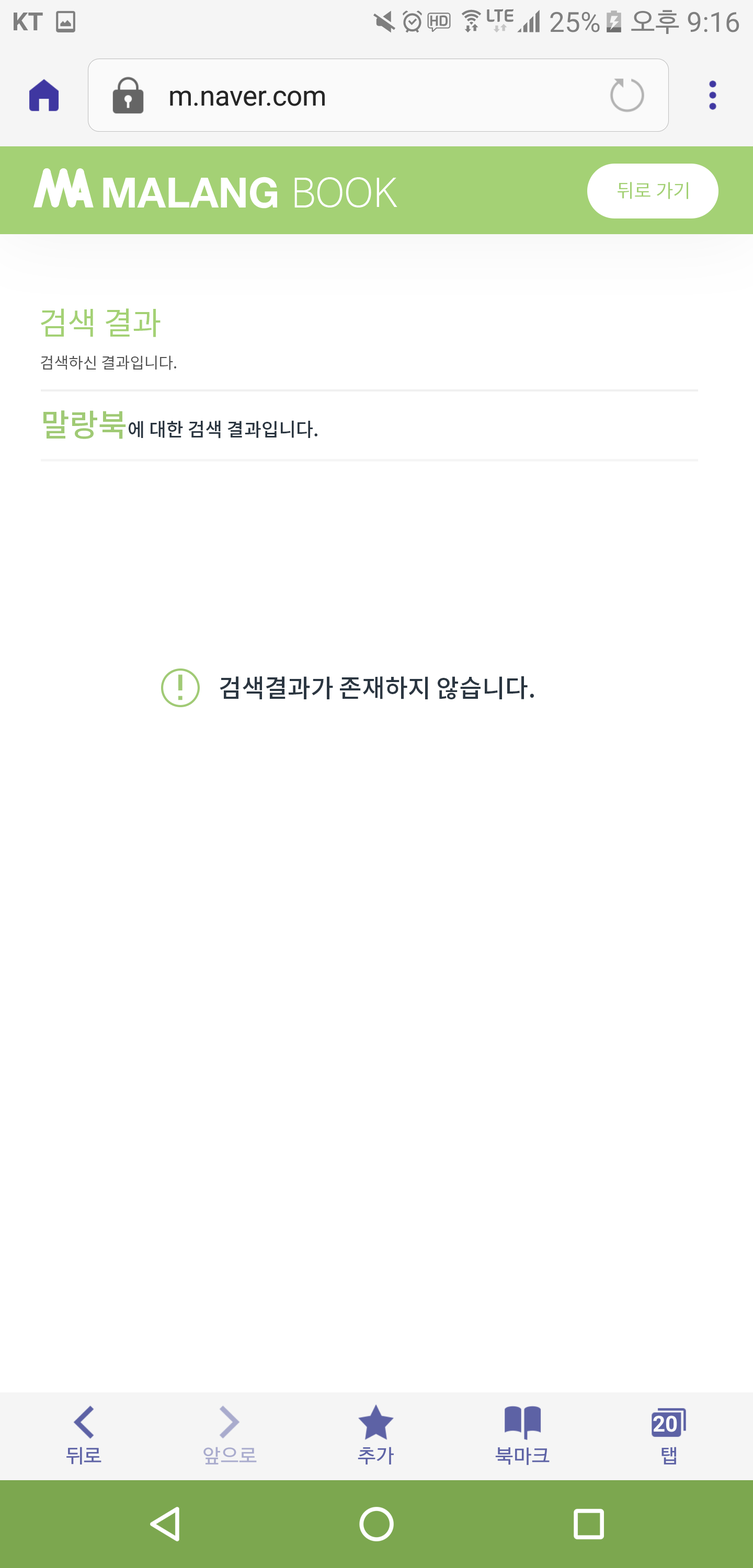
<style>
.page{position:relative;width:753px;height:1568px;background:#ffffff}
.page>*{position:absolute;margin:0}
.t1{font:18.8px "NotoSansCJKkr-Regular";color:#a4d175}
.t2{font:31.4px "NotoSansCJKkr-Regular";color:#a4d175}
.t3{font:15.7px "NotoSansCJKkr-Regular";color:#535353}
.t4{font:18.8px "NotoSansCJKkr-Medium";color:#2b3641}
.t5{font:31.4px "NotoSansCJKkr-Medium";color:#a0ca75}
.t6{font:25.1px "NotoSansCJKkr-Medium";color:#2b3641}
</style>
<div class="page">
<p class="t1" style="left:617px;top:182px;width:71px;height:17px">뒤로 가기</p>
<p class="t2" style="left:41px;top:308px;width:119px;height:29px">검색 결과</p>
<p class="t3" style="left:41px;top:355px;width:135px;height:15px">검색하신 결과입니다.</p>
<p class="t4" style="left:43px;top:410px;width:274px;height:29px"><span class="t5">말랑북</span>에 대한 검색 결과입니다.</p>
<p class="t6" style="left:220px;top:676px;width:314px;height:23px">검색결과가 존재하지 않습니다.</p>
</div>
